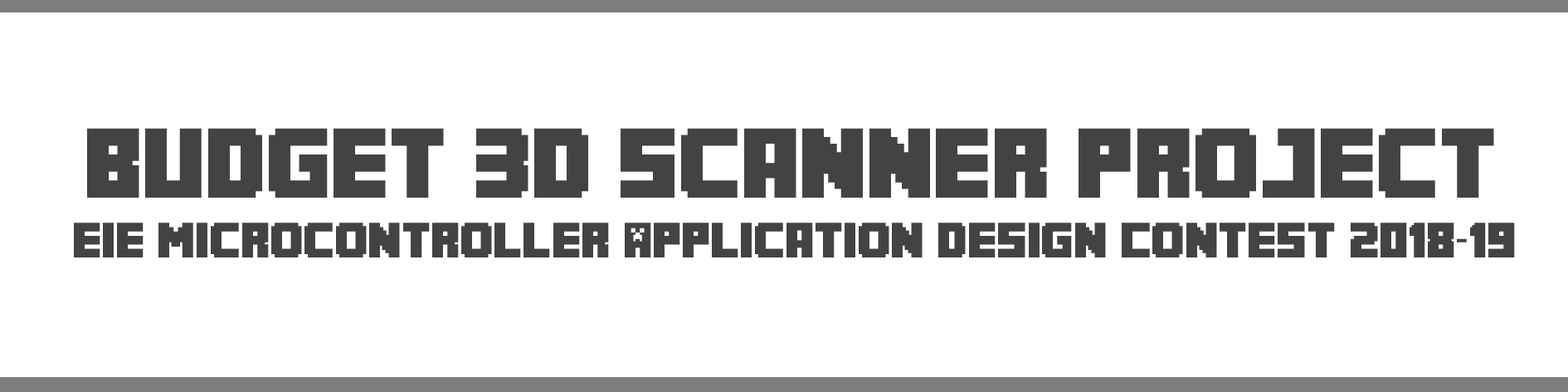
<style>
.page{position:relative;width:1568px;height:392px;background:#ffffff}
.page>*{position:absolute;margin:0}
.t1{font:69.1px "MineCrafter-3";color:#434343}
.t2{font:34.6px "MineCrafter-3";color:#434343}
</style>
<div class="page">
<p class="t1" style="left:87px;top:128px;width:1407px;height:69px">Budget 3D Scanner Project</p>
<p class="t2" style="left:74px;top:222px;width:1441px;height:35px">EIE Microcontroller Application Design Contest 2018-19</p>
</div>
